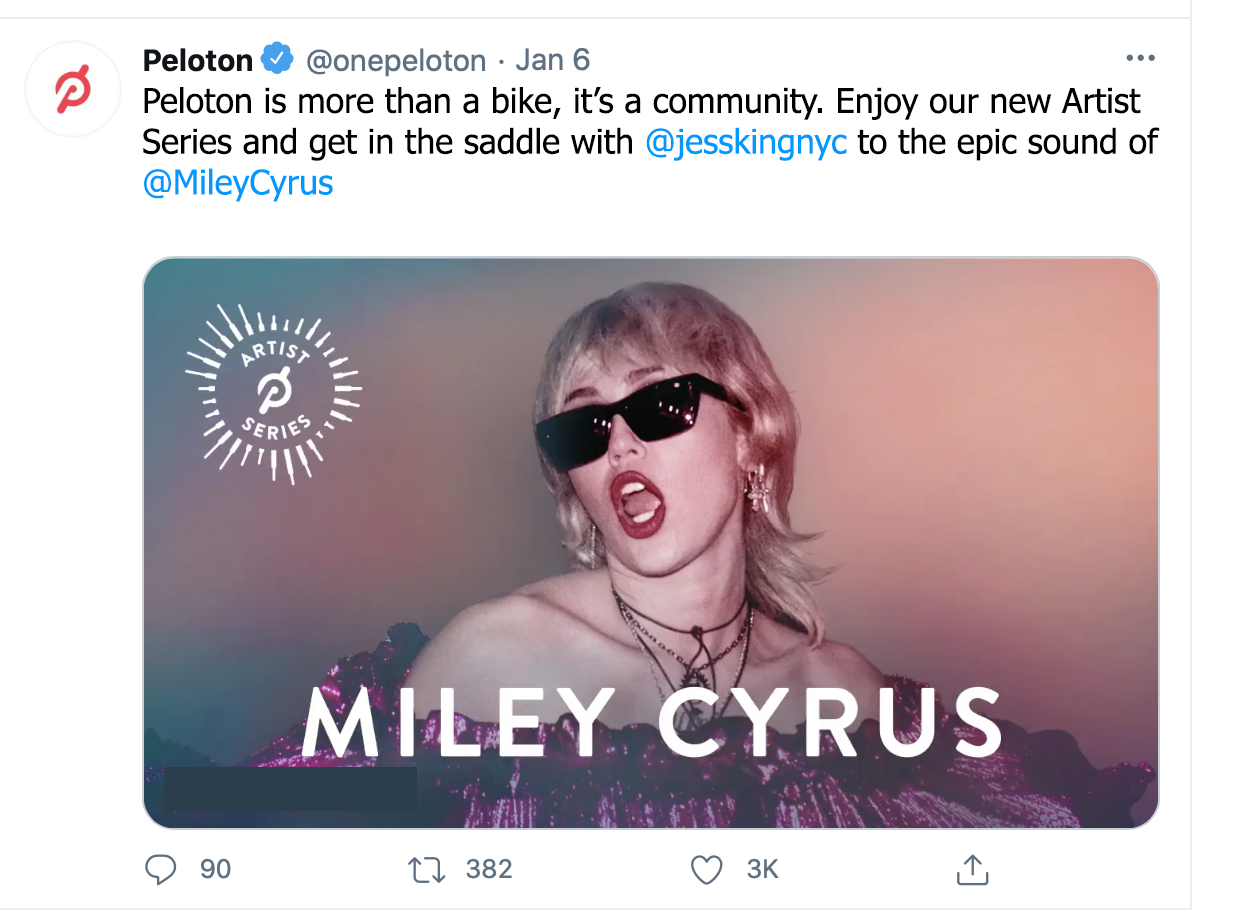
<style>
.page{position:relative;width:1234px;height:910px;background:#ffffff}
.page>*{position:absolute;margin:0}
.t1{font:32px "Tahoma";color:#ffffff}
.t2{font:34px "Tahoma";color:#000000}
.t3{font:34px "Tahoma";color:#0099ff}
.t4{font:34px "Tahoma";color:#ffffff}
</style>
<div class="page">
<p class="t1" style="left:142px;top:87px;width:1018px;height:153px"><span class="t2">Peloton is more than a bike, it’s a community. Enjoy our new Artist Series and get in the saddle with </span><span class="t3">@jesskingnyc</span><span class="t2"> to the epic sound of </span><span class="t3">@MileyCyrus  </span><span class="t4">p</span>sum dolor sit amet, consectetur adipiscing elit, sed do eiusmod tempor incididunt ut labore et dolore magna aliqua. Quis ipsum suspendisse ultrices gravida. Risus commodo viverra maecenas accumsan lacus vel facilisis.</p>
</div>
